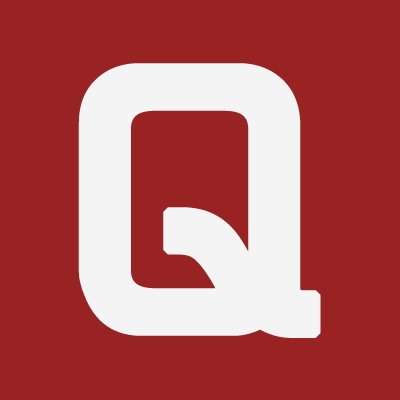
<style>
.page{position:relative;width:400px;height:400px;background:#992222}
.page>*{position:absolute;margin:0}
.t1{font:350px "TRENDS";color:#f4f4f4;font-weight:bold}
</style>
<div class="page">
<p class="t1" style="left:78px;top:63px;width:243px;height:275px">Q</p>
</div>
